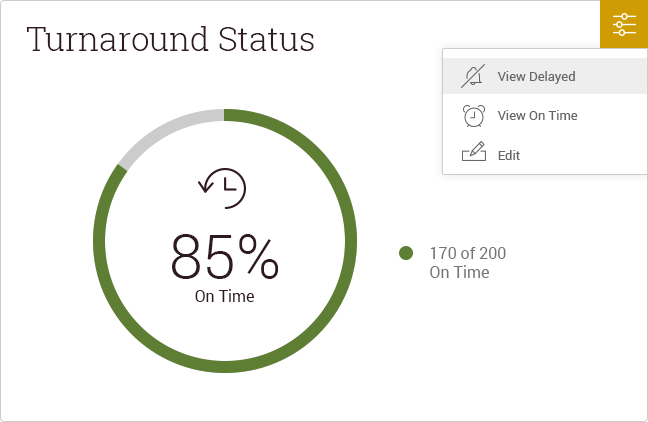
<style>
.page{position:relative;width:648px;height:422px;background:#ffffff}
.page>*{position:absolute;margin:0}
.t1{font:33px "RobotoSlab-Light";color:#2f1b1f}
.t2{font:13px "Roboto-Regular";color:#666666}
.t3{font:61px "Roboto-Light";color:#2f1b1f}
.t4{font:16px "Roboto-Regular";color:#767676}
.t5{font:16px "Roboto-Regular";color:#2f1b1f}
</style>
<div class="page">
<p class="t1" style="left:26px;top:26px;width:288px;height:25px">Turnaround Status</p>
<p class="t2" style="left:497px;top:71px;width:78px;height:13px">View Delayed</p>
<p class="t2" style="left:497px;top:110px;width:81px;height:10px">View On Time</p>
<p class="t2" style="left:498px;top:150px;width:22px;height:10px">Edit</p>
<p class="t3" style="left:172px;top:234px;width:107px;height:45px">85%</p>
<p class="t4" style="left:430px;top:247px;width:76px;height:31px">170 of 200 <br>On Time</p>
<p class="t5" style="left:195px;top:289px;width:59px;height:13px">On Time</p>
</div>
